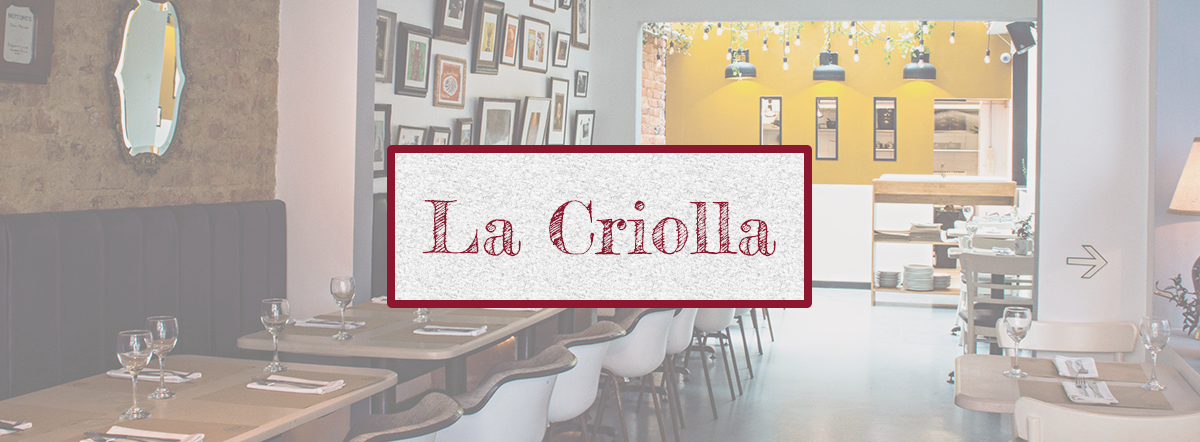
<style>
.page{position:relative;width:1200px;height:442px}
.page>*{position:absolute;margin:0}
.t1{font:72px "FrederickatheGreat-Regular";color:#8c172e}
</style>
<div class="page">
<p class="t1" style="left:422px;top:200px;width:354px;height:57px">La Criolla</p>
</div>
